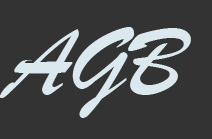
<style>
.page{position:relative;width:212px;height:139px;background:#333333}
.page>*{position:absolute;margin:0}
.t1{font:100px "BrushScriptMT";color:#dbe9ee}
</style>
<div class="page">
<p class="t1" style="left:0px;top:27px;width:191px;height:91px">AGB</p>
</div>
